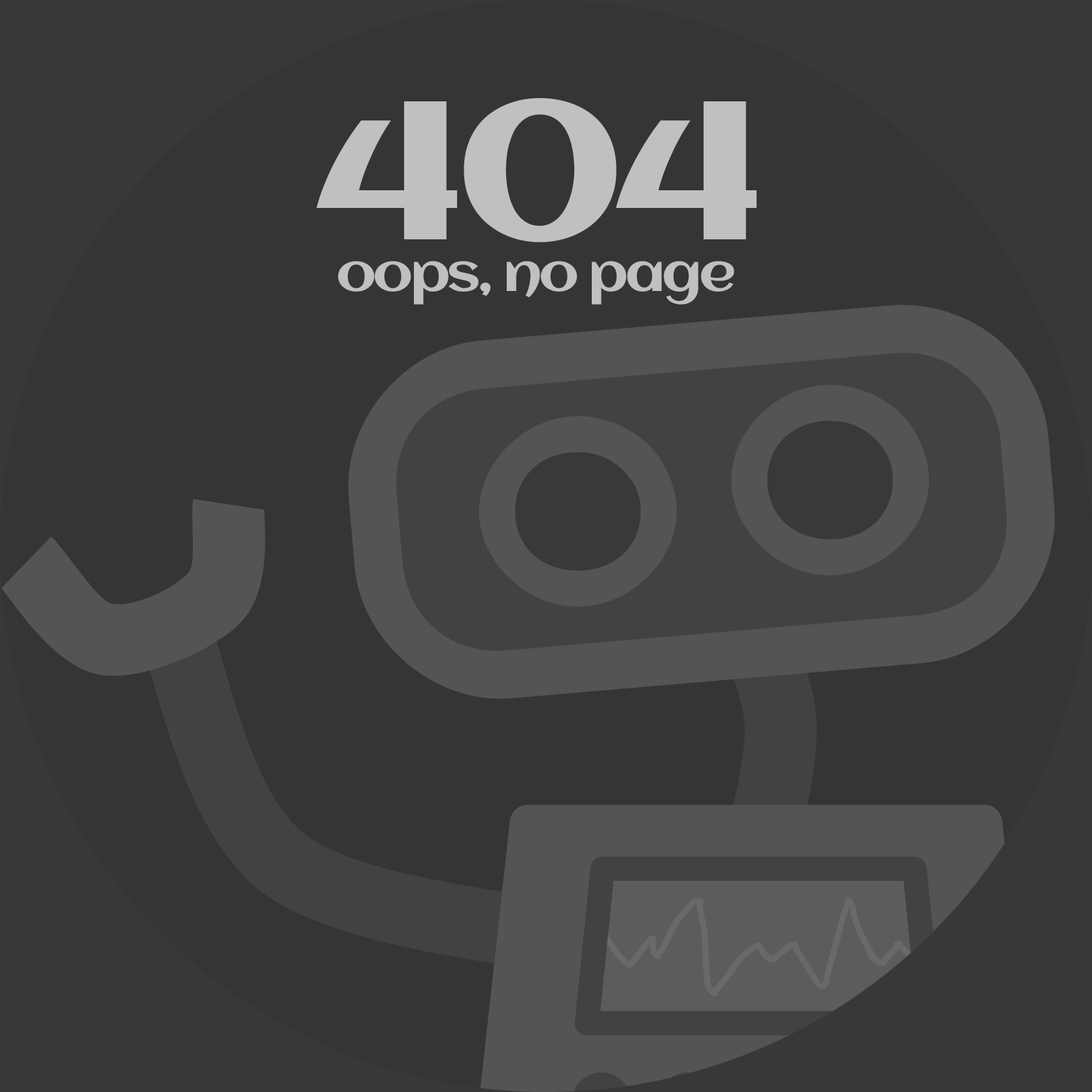
<style>
.page{position:relative;width:1092px;height:1092px;background:#353535}
.page>*{position:absolute;margin:0}
.t1{font:196.2px "Aclonica-Regular";letter-spacing:-0.06em;color:#c0c0c0;scale:1.11 1}
.t2{font:51.7px "Aclonica-Regular";letter-spacing:-0.06em;color:#c0c0c0;scale:1.11 1}
</style>
<div class="page">
<p class="t1" style="left:316px;top:98px;width:441px;height:145px">404</p>
<p class="t2" style="left:338px;top:261px;width:396px;height:44px">oops, no page</p>
</div>
